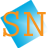
<style>
.page{position:relative;width:48px;height:48px;background:#ffffff}
.page>*{position:absolute;margin:0}
.t1{font:39.9px "PrestigeEliteStd-Bd";color:#f7931d}
</style>
<div class="page">
<p class="t1" style="left:3px;top:11px;width:43px;height:26px">SN</p>
</div>
